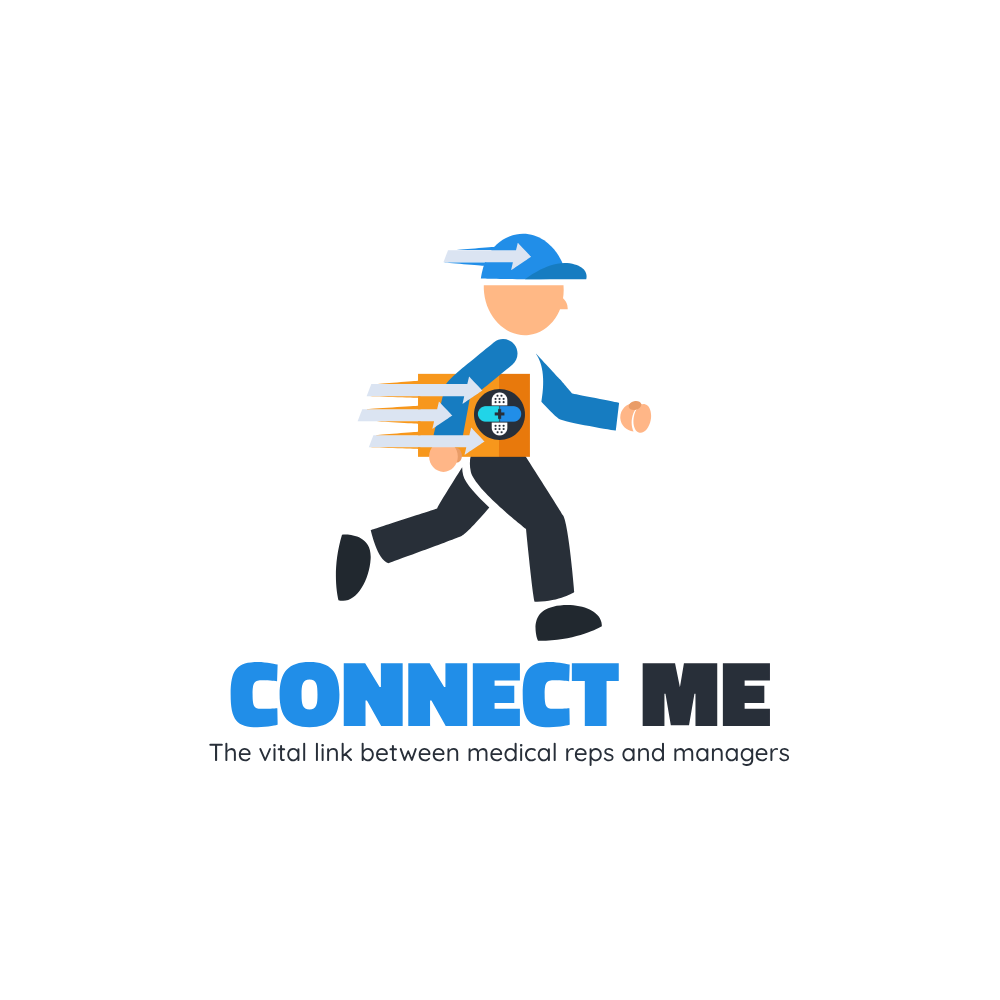
<style>
.page{position:relative;width:1000px;height:1000px;background:#ffffff}
.page>*{position:absolute;margin:0}
.t1{font:93.8px "Titillium-Black";color:#218ee8}
.t2{font:93.8px "Titillium-Black";color:#282f39}
.t3{font:24.6px "Quicksand-Medium";color:#282f39}
</style>
<div class="page">
<p class="t1" style="left:230px;top:661px;width:540px;height:67px">CONNECT <span class="t2">ME</span></p>
<p class="t3" style="left:209px;top:742px;width:581px;height:24px">The vital link between medical reps and managers</p>
</div>
